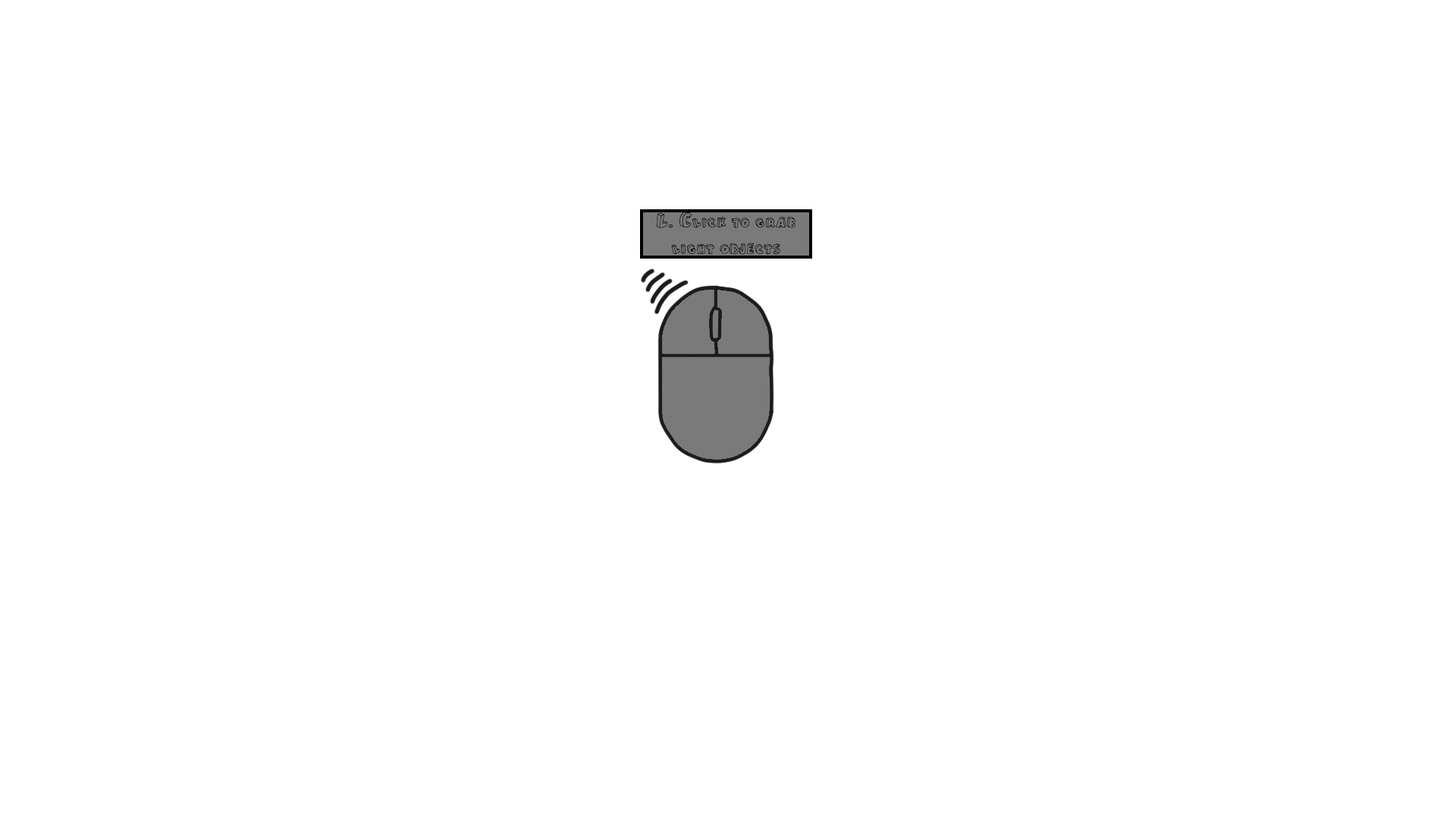
<style>
.page{position:relative;width:1456px;height:819px;background:#ffffff}
.page>*{position:absolute;margin:0}
.t1{font:22px "CartoonBlocks";color:#000000}
</style>
<div class="page">
<p class="t1" style="left:657px;top:212px;width:138px;height:43px;text-align:center">L. Click to grab<br>light objects</p>
</div>
